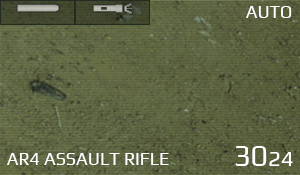
<style>
.page{position:relative;width:300px;height:175px}
.page>*{position:absolute;margin:0}
.t1{font:18px "Play-Regular";color:#ffffff}
.t2{font:30px "Play-Regular";color:#ffffff}
.t3{font:22px "Play-Regular";color:#ffffff}
</style>
<div class="page">
<p class="t1" style="left:246px;top:6px;width:46px;height:12px">AUTO</p>
<p class="t2" style="left:235px;top:146px;width:58px;height:20px">30<span class="t3">24</span></p>
<p class="t1" style="left:7px;top:153px;width:162px;height:12px">AR4 ASSAULT RIFLE</p>
</div>
